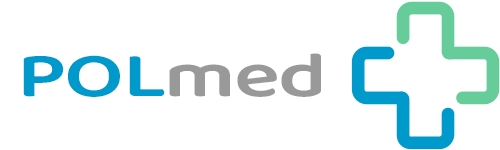
<style>
.page{position:relative;width:500px;height:150px;background:#ffffff}
.page>*{position:absolute;margin:0}
.t1{font:64.6px "BalooBhaijaan2-SemiBold";letter-spacing:-0.02em;color:#0099cc;scale:1.33 1}
.t2{font:64.6px "BalooBhaijaan2-SemiBold";letter-spacing:-0.02em;color:#999999;scale:1.33 1}
</style>
<div class="page">
<p class="t1" style="left:23px;top:53px;width:298px;height:44px">POL<span class="t2">med</span></p>
</div>
